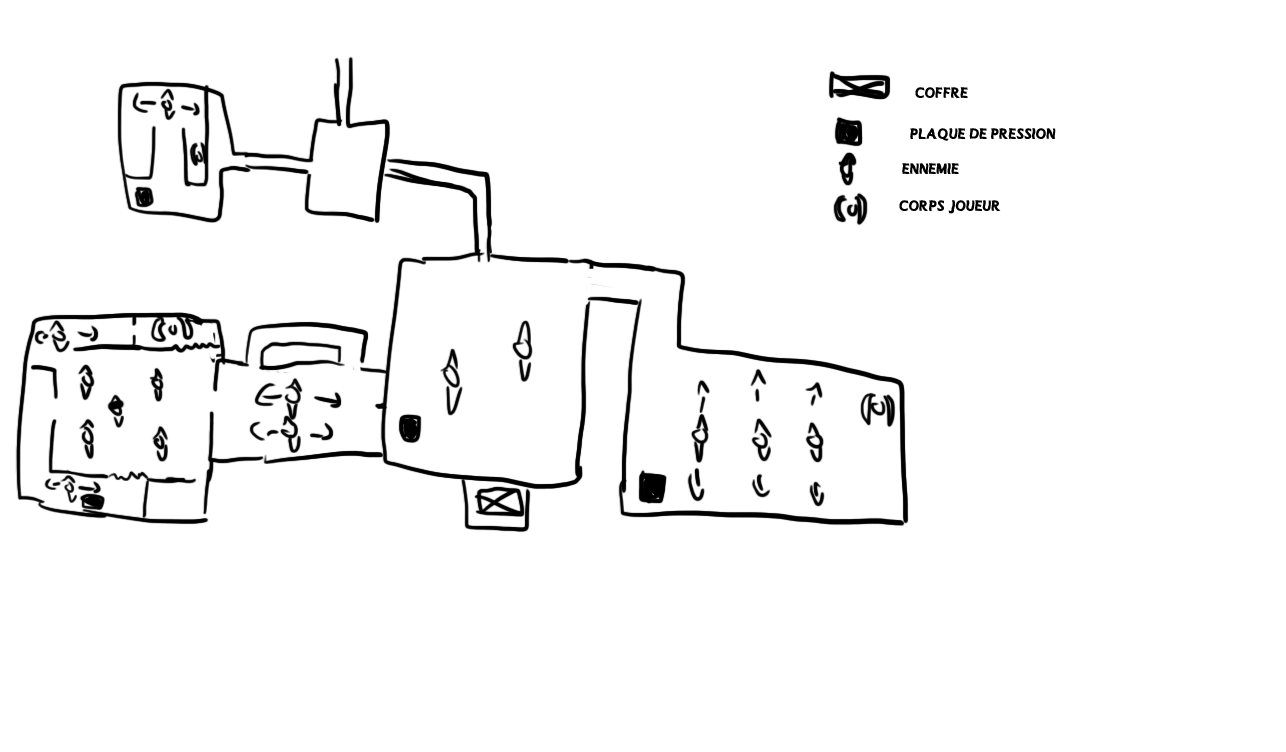
<style>
.page{position:relative;width:1286px;height:752px;background:#ffffff}
.page>*{position:absolute;margin:0}
.t1{font:15.4px "MANOLETE";color:#000000}
</style>
<div class="page">
<p class="t1" style="left:915px;top:87px;width:53px;height:11px">coffre</p>
<p class="t1" style="left:910px;top:128px;width:146px;height:13px">plaque de pression</p>
<p class="t1" style="left:902px;top:163px;width:57px;height:11px">ennemie</p>
<p class="t1" style="left:899px;top:200px;width:102px;height:14px">corps joueur</p>
</div>
